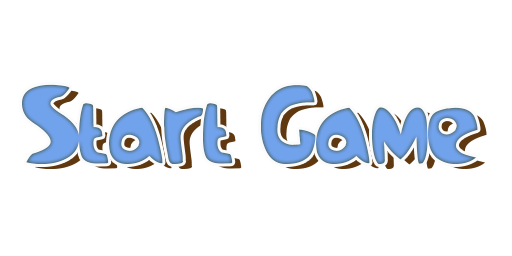
<style>
.page{position:relative;width:512px;height:256px;background:#ffffff}
.page>*{position:absolute;margin:0}
.t1{font:113.1px "Samba";color:#70a2ec}
.t2{font:113.1px "Samba"}
</style>
<div class="page">
<p class="t1" style="left:22px;top:84px;width:456px;height:80px">Start Game</p>
<p class="t2" style="left:31px;top:89px;width:456px;height:80px">Start Game</p>
</div>
